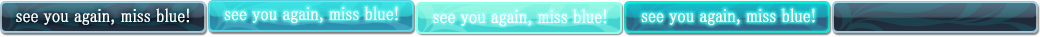
<style>
.page{position:relative;width:1040px;height:37px}
.page>*{position:absolute;margin:0}
.t1{font:19px "MS-PMincho";color:#ffffff;font-weight:bold;scale:0.84 1}
</style>
<div class="page">
<p class="t1" style="left:224px;top:6px;width:174px;height:17px">see you again, miss blue!</p>
<p class="t1" style="left:16px;top:8px;width:173px;height:17px">see you again, miss blue!</p>
<p class="t1" style="left:433px;top:9px;width:173px;height:17px">see you again, miss blue!</p>
<p class="t1" style="left:641px;top:8px;width:174px;height:17px">see you again, miss blue!</p>
</div>
